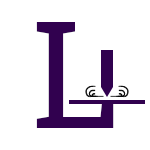
<style>
.page{position:relative;width:150px;height:150px;background:#ffffff}
.page>*{position:absolute;margin:0}
.t1{font:149px "RobotoSlab-Regular";color:#31014f}
</style>
<div class="page">
<p class="t1" style="left:36px;top:22px;width:78px;height:106px">L</p>
</div>
